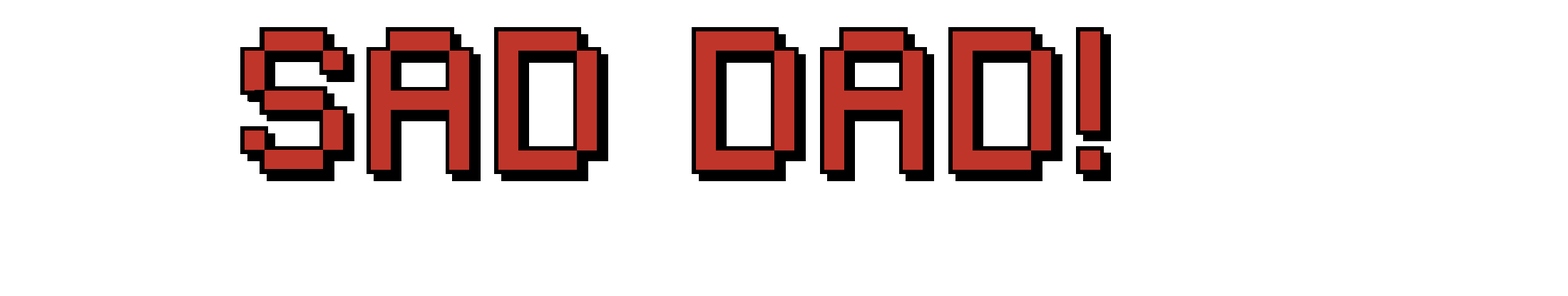
<style>
.page{position:relative;width:1568px;height:296px;background:#ffffff}
.page>*{position:absolute;margin:0}
.t1{font:138.7px "Backto1982";color:#000000}
</style>
<div class="page">
<p class="t1" style="left:240px;top:27px;width:871px;height:154px">sad dad!</p>
</div>
